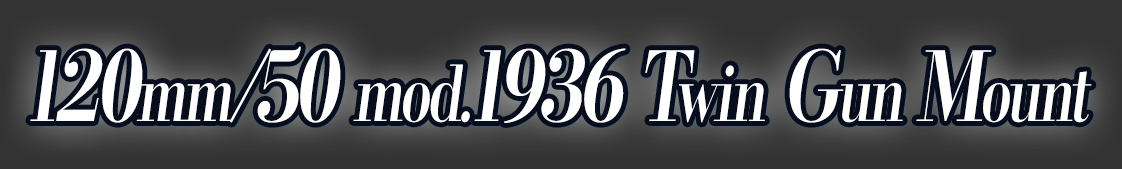
<style>
.page{position:relative;width:1122px;height:169px;background:#333333}
.page>*{position:absolute;margin:0}
.t1{font:96px "KochoStd-Heavy";letter-spacing:-0.065em;color:#ffffff;font-style:italic;scale:0.75 1}
.t2{font:76.8px "KochoStd-Heavy";letter-spacing:-0.065em;color:#ffffff;font-style:italic;scale:0.75 1}
</style>
<div class="page">
<p class="t1" style="left:30px;top:46px;width:1062px;height:77px">120<span class="t2">mm</span>/50 <span class="t2">mod.</span>1936 T<span class="t2">win</span> G<span class="t2">un </span>M<span class="t2">ount</span></p>
</div>
